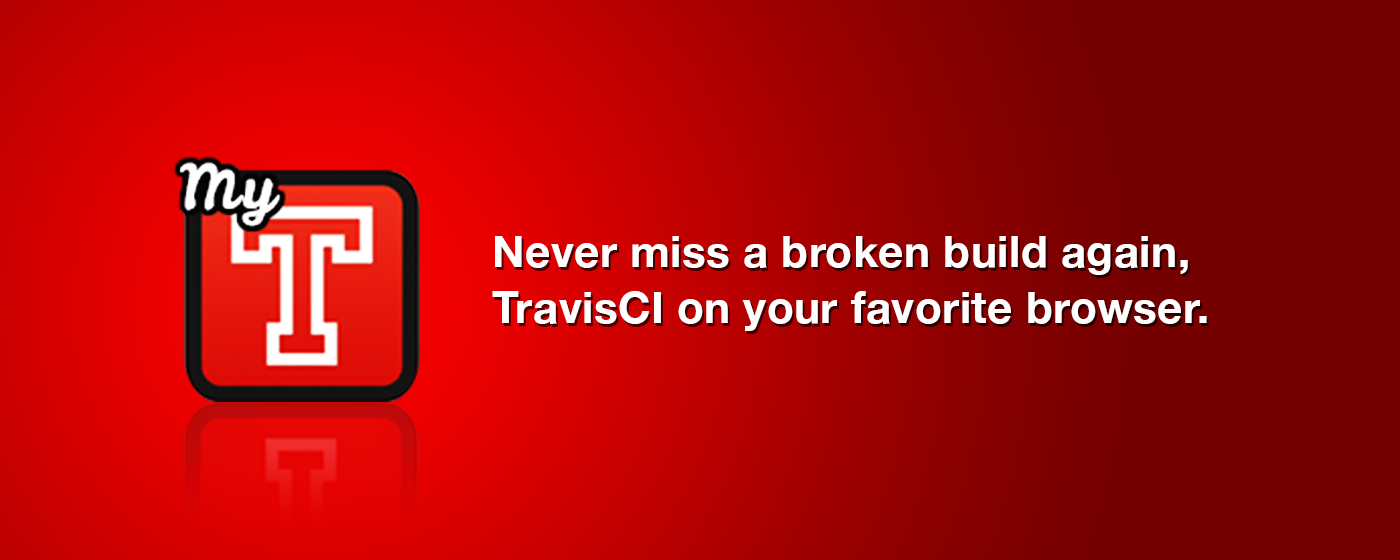
<style>
.page{position:relative;width:1400px;height:560px}
.page>*{position:absolute;margin:0}
.t1{font:44px/56px "HelveticaNeue-Bold";letter-spacing:0.01em;color:#ffffff}
</style>
<div class="page">
<p class="t1" style="left:492px;top:236px;width:715px;height:95px">Never miss a broken build again,<br>TravisCI on your favorite browser.</p>
</div>
